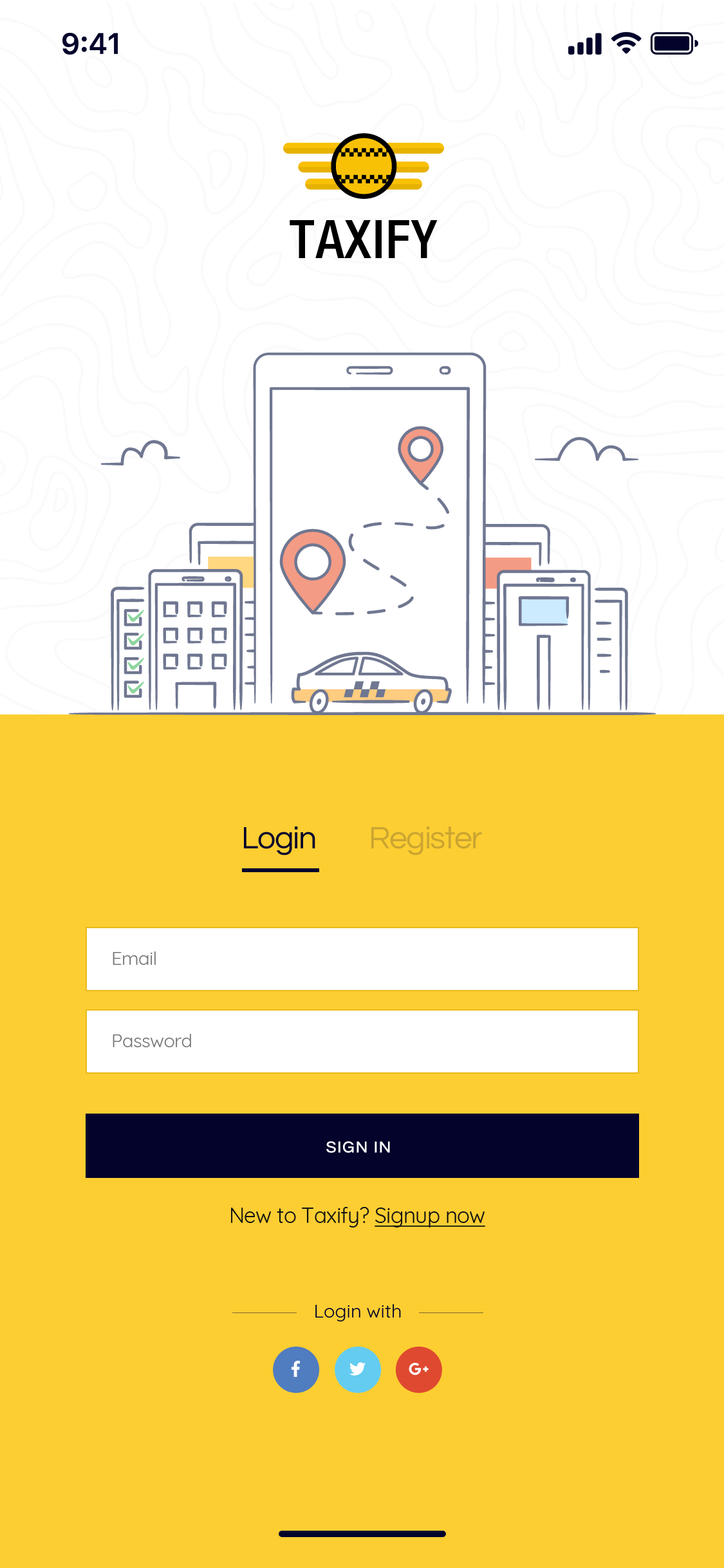
<style>
.page{position:relative;width:724px;height:1568px;background:#fdce32}
.page>*{position:absolute;margin:0}
.t1{font:53.6px "HelveticaNeue-MediumCond";letter-spacing:0.02em;color:#000000;text-transform:uppercase}
.t2{font:32.2px "Questrial-Regular";letter-spacing:-0.03em;color:#03032b}
.t3{font:32.2px "Questrial-Regular";letter-spacing:-0.03em;color:#cba531}
.t4{font:18.8px "Quicksand-Regular";letter-spacing:-0.02em;color:#777777}
.t5{font:16.1px "Questrial-Regular";letter-spacing:0.06em;color:#ffffff;font-weight:bold}
.t6{font:21.5px "Quicksand-Regular";letter-spacing:-0.02em;color:#121212}
.t7{font:21.5px "Quicksand-Regular";letter-spacing:-0.02em;color:#121212;text-decoration:underline}
.t8{font:18.8px "Quicksand-Regular";color:#03032b}
</style>
<div class="page">
<p class="t1" style="left:290px;top:220px;width:148px;height:38px">Taxify</p>
<p class="t2" style="left:244px;top:826px;width:71px;height:29px">Login</p>
<p class="t3" style="left:371px;top:826px;width:111px;height:29px">Register</p>
<p class="t4" style="left:113px;top:951px;width:43px;height:14px">Email</p>
<p class="t4" style="left:113px;top:1034px;width:78px;height:13px">Password</p>
<p class="t5" style="left:326px;top:1141px;width:64px;height:12px">SIGN IN</p>
<p class="t6" style="left:231px;top:1207px;width:254px;height:20px">New to Taxify? <span class="t7">Signup now</span></p>
<p class="t8" style="left:315px;top:1304px;width:86px;height:17px">Login with</p>
</div>
